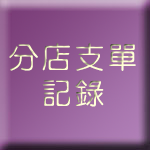
<style>
.page{position:relative;width:150px;height:150px}
.page>*{position:absolute;margin:0}
.t1{font:30px "DFYuan-Lt-HK-BF";letter-spacing:0.1em;color:#ffffcc}
</style>
<div class="page">
<p class="t1" style="left:9px;top:43px;width:127px;height:64px;text-align:center">分店支單<br>記錄</p>
</div>
